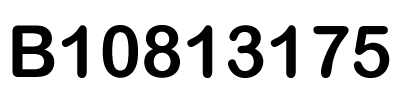
<style>
.page{position:relative;width:400px;height:100px;background:#ffffff}
.page>*{position:absolute;margin:0}
.t1{font:72px "ArialRoundedMTBold";color:#000000}
</style>
<div class="page">
<p class="t1" style="left:12px;top:25px;width:378px;height:53px">B10813175</p>
</div>
